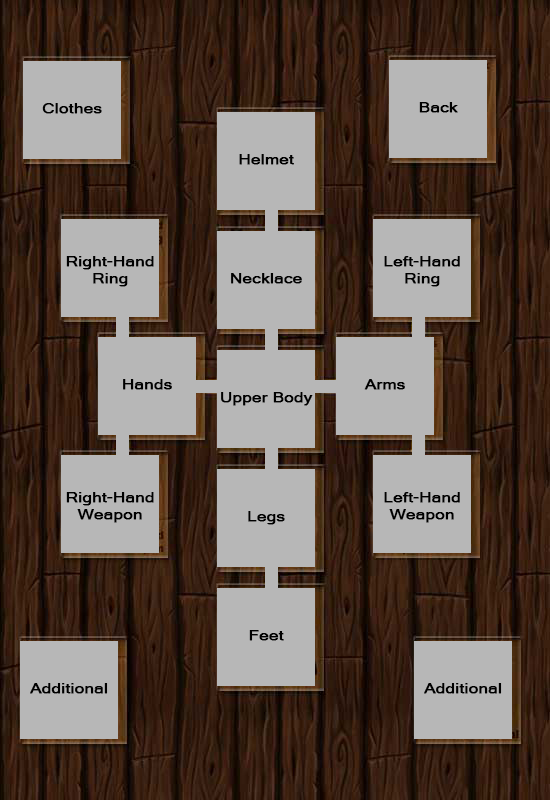
<style>
.page{position:relative;width:550px;height:800px;background:#b7b7b7}
.page>*{position:absolute;margin:0}
.t1{font:14px "MicrosoftSansSerif";color:#000000;font-weight:bold;scale:1.19 1}
</style>
<div class="page">
<p class="t1" style="left:419px;top:102px;width:39px;height:11px">Back</p>
<p class="t1" style="left:42px;top:103px;width:60px;height:11px">Clothes</p>
<p class="t1" style="left:239px;top:154px;width:55px;height:11px">Helmet</p>
<p class="t1" style="left:66px;top:256px;width:88px;height:31px;text-align:center">Right-Hand Ring</p>
<p class="t1" style="left:384px;top:256px;width:76px;height:31px;text-align:center">Left-Hand Ring</p>
<p class="t1" style="left:231px;top:273px;width:71px;height:11px">Necklace</p>
<p class="t1" style="left:123px;top:379px;width:49px;height:11px">Hands</p>
<p class="t1" style="left:364px;top:379px;width:41px;height:11px">Arms</p>
<p class="t1" style="left:221px;top:392px;width:92px;height:14px">Upper Body</p>
<p class="t1" style="left:66px;top:492px;width:88px;height:31px;text-align:center">Right-Hand Weapon</p>
<p class="t1" style="left:384px;top:492px;width:76px;height:31px;text-align:center">Left-Hand Weapon</p>
<p class="t1" style="left:248px;top:511px;width:37px;height:14px">Legs</p>
<p class="t1" style="left:249px;top:630px;width:35px;height:11px">Feet</p>
<p class="t1" style="left:30px;top:683px;width:78px;height:11px">Additional</p>
<p class="t1" style="left:424px;top:683px;width:78px;height:11px">Additional</p>
</div>
